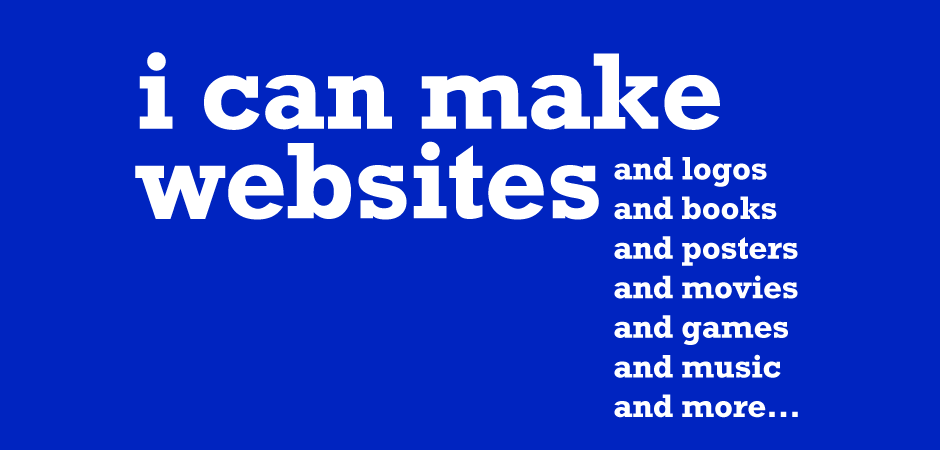
<style>
.page{position:relative;width:940px;height:450px;background:#0024c0}
.page>*{position:absolute;margin:0}
.t1{font:110.4px "Rockwell-Bold";letter-spacing:-0.01em;color:#ffffff}
.t2{font:33.3px/39.6px "Rockwell-Bold";letter-spacing:-0.01em;color:#ffffff}
</style>
<div class="page">
<p class="t1" style="left:135px;top:52px;width:585px;height:168px">i can make websites</p>
<p class="t2" style="left:614px;top:157px;width:184px;height:261px">and logos<br>and books<br>and posters<br>and movies<br>and games<br>and music<br>and more...</p>
</div>
